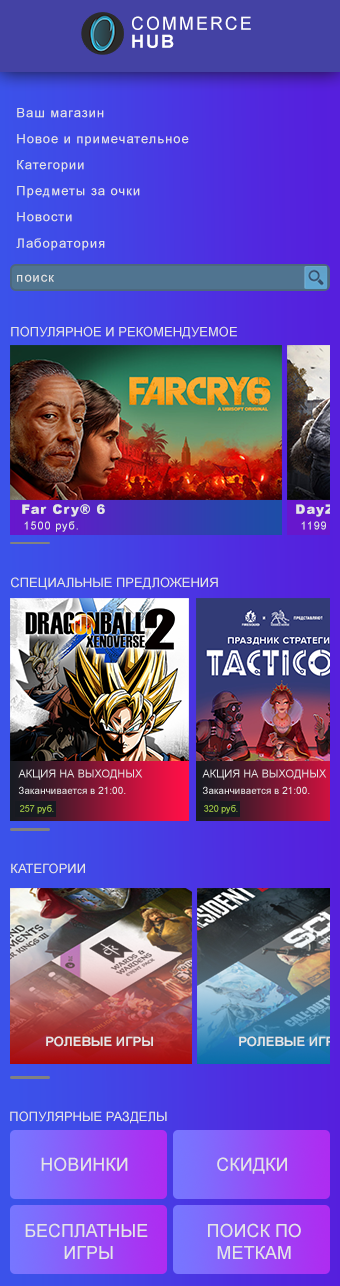
<style>
.page{position:relative;width:340px;height:1286px}
.page>*{position:absolute;margin:0}
.t1{font:18px/18px "ArialMT";letter-spacing:0.075em;color:#ffffff;text-transform:uppercase}
.t2{font:18px/18px "Arial-BoldMT";letter-spacing:0.075em;color:#ffffff;text-transform:uppercase}
.t3{font:13px "ArialMT";letter-spacing:0.075em;color:#e5e5e5}
.t4{font:13px "ArialMT";color:#e5e5e5}
.t5{font:13px "Arial-Black";letter-spacing:0.075em;color:#e5e5e5}
.t6{font:11px "ArialMT";letter-spacing:0.075em;color:#e5e5e5}
.t7{font:9px "ArialMT"}
.t8{font:13px "Arial-BoldMT";color:#e5e5e5}
.t9{font:18px "ArialMT";color:#e5e5e5}
.t10{font:18px/11px "ArialMT";color:#e5e5e5}
</style>
<div class="page">
<p class="t1" style="left:132px;top:16px;width:119px;height:32px">Commerce<br><span class="t2">Hub</span></p>
<p class="t3" style="left:17px;top:108px;width:87px;height:10px">Ваш магазин</p>
<p class="t3" style="left:17px;top:134px;width:172px;height:12px">Новое и примечательное</p>
<p class="t3" style="left:17px;top:160px;width:67px;height:12px">Категории</p>
<p class="t3" style="left:17px;top:186px;width:123px;height:12px">Предметы за очки</p>
<p class="t3" style="left:17px;top:212px;width:55px;height:10px">Новости</p>
<p class="t3" style="left:16px;top:238px;width:89px;height:13px">Лаборатория</p>
<p class="t3" style="left:17px;top:274px;width:37px;height:8px">поиск</p>
<p class="t4" style="left:11px;top:326px;width:226px;height:13px">ПОПУЛЯРНОЕ И РЕКОМЕНДУЕМОЕ</p>
<p class="t5" style="left:22px;top:504px;width:83px;height:13px">Far Cry® 6</p>
<p class="t5" style="left:296px;top:504px;width:39px;height:13px">DayZ</p>
<p class="t6" style="left:24px;top:521px;width:54px;height:11px">1500 руб.</p>
<p class="t6" style="left:301px;top:521px;width:25px;height:9px">1199</p>
<p class="t4" style="left:11px;top:577px;width:207px;height:13px">СПЕЦИАЛЬНЫЕ ПРЕДЛОЖЕНИЯ</p>
<p class="t7" style="left:20px;top:805px;width:34px;height:9px">257 руб.</p>
<p class="t7" style="left:204px;top:805px;width:34px;height:9px">320 руб.</p>
<p class="t4" style="left:11px;top:863px;width:74px;height:11px">КАТЕГОРИИ</p>
<p class="t8" style="left:46px;top:1036px;width:107px;height:11px">РОЛЕВЫЕ ИГРЫ</p>
<p class="t4" style="left:10px;top:1111px;width:157px;height:13px">ПОПУЛЯРНЫЕ РАЗДЕЛЫ</p>
<p class="t9" style="left:41px;top:1157px;width:87px;height:14px">НОВИНКИ</p>
<p class="t9" style="left:217px;top:1157px;width:70px;height:17px">СКИДКИ</p>
<p class="t10" style="left:25px;top:1223px;width:123px;height:36px;text-align:center">БЕСПЛАТНЫЕ<br><br> ИГРЫ</p>
<p class="t10" style="left:208px;top:1223px;width:93px;height:36px;text-align:center">ПОИСК ПО<br> <br>МЕТКАМ</p>
</div>
